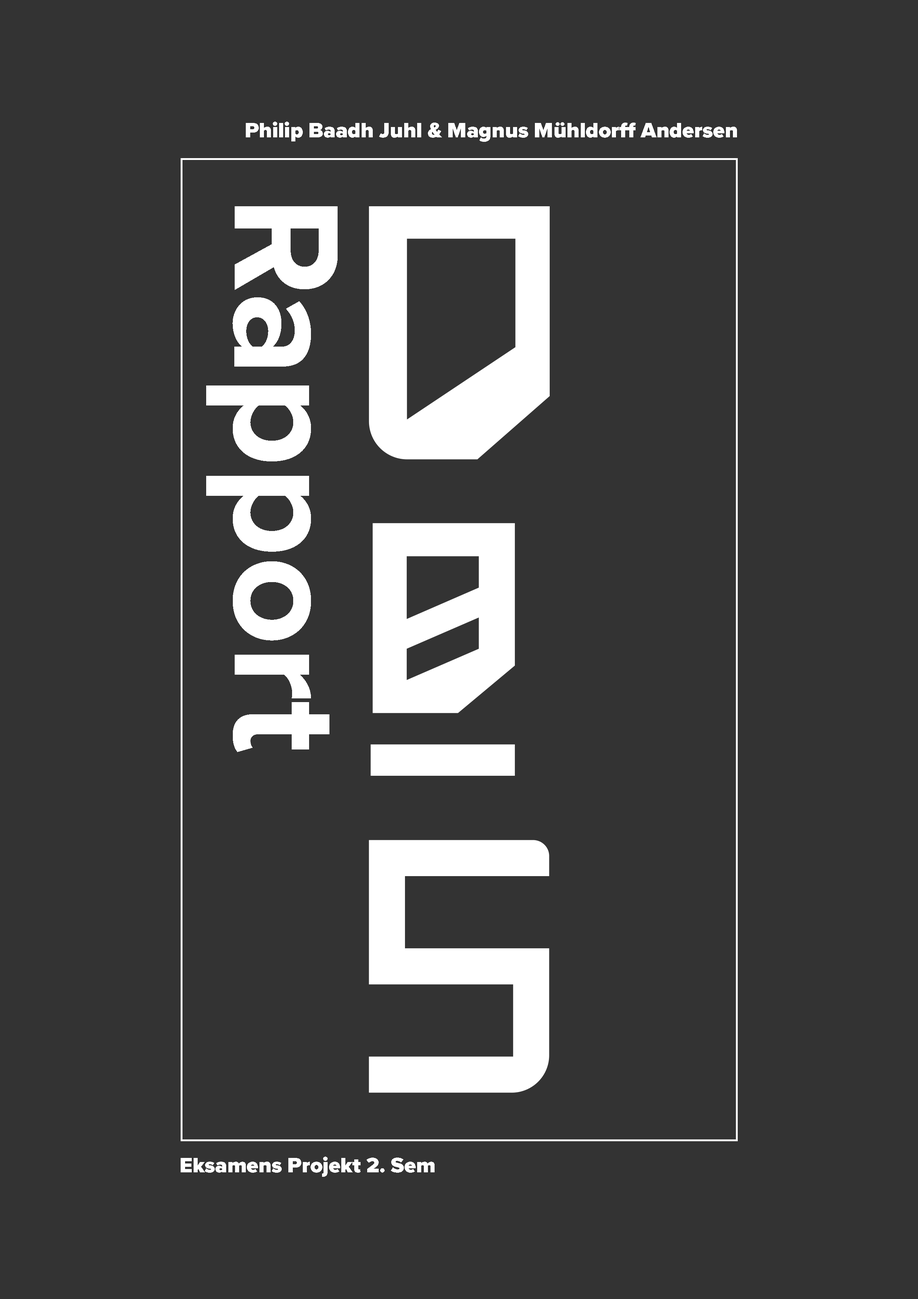
<style>
.page{position:relative;width:918px;height:1299px;background:#333333}
.page>*{position:absolute;margin:0}
.t1{font:21.6px "ProximaNova-Black";color:#ffffff}
.t2{font:154.3px "ProximaNova-Bold";color:#ffffff}
</style>
<div class="page">
<p class="t1" style="left:246px;top:121px;width:491px;height:21px">Philip Baadh Juhl &amp; Magnus Mühldorff Andersen</p>
<p class="t2" style="left:206px;top:206px;width:132px;height:546px;rotate:90deg">Rapport</p>
<p class="t1" style="left:181px;top:1156px;width:254px;height:21px">Eksamens Projekt 2. Sem</p>
</div>
